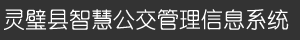
<style>
.page{position:relative;width:300px;height:40px;background:#333333}
.page>*{position:absolute;margin:0}
.t1{font:22px "YouYuan";color:#ffffff}
</style>
<div class="page">
<p class="t1" style="left:4px;top:9px;width:285px;height:21px">灵璧县智慧公交管理信息系统</p>
</div>
